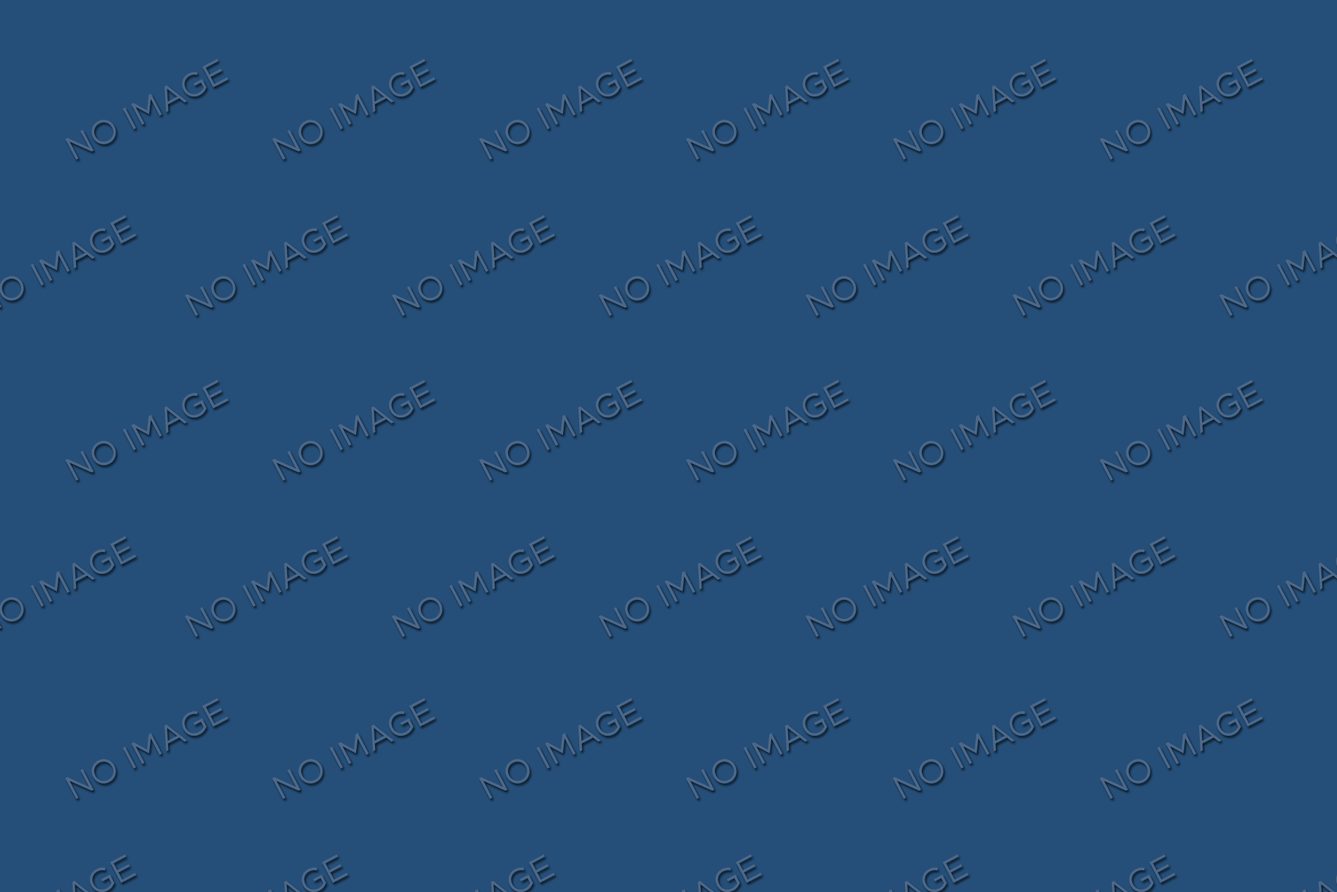
<style>
.page{position:relative;width:1337px;height:892px;background:#254f79}
.page>*{position:absolute;margin:0}
.t1{font:33.2px "Gotham-Book";color:#4b688a}
</style>
<div class="page">
<p class="t1" style="left:65px;top:58px;width:164px;height:102px;rotate:-28deg">NO IMAGE</p>
<p class="t1" style="left:272px;top:58px;width:164px;height:102px;rotate:-28deg">NO IMAGE</p>
<p class="t1" style="left:479px;top:58px;width:164px;height:102px;rotate:-28deg">NO IMAGE</p>
<p class="t1" style="left:686px;top:58px;width:163px;height:102px;rotate:-28deg">NO IMAGE</p>
<p class="t1" style="left:892px;top:58px;width:164px;height:102px;rotate:-28deg">NO IMAGE</p>
<p class="t1" style="left:1099px;top:58px;width:164px;height:102px;rotate:-28deg">NO IMAGE</p>
<p class="t1" style="left:184px;top:215px;width:164px;height:101px;rotate:-28deg">NO IMAGE</p>
<p class="t1" style="left:391px;top:215px;width:164px;height:101px;rotate:-28deg">NO IMAGE</p>
<p class="t1" style="left:598px;top:215px;width:164px;height:101px;rotate:-28deg">NO IMAGE</p>
<p class="t1" style="left:805px;top:215px;width:164px;height:101px;rotate:-28deg">NO IMAGE</p>
<p class="t1" style="left:1012px;top:215px;width:164px;height:101px;rotate:-28deg">NO IMAGE</p>
<p class="t1" style="left:65px;top:379px;width:164px;height:102px;rotate:-28deg">NO IMAGE</p>
<p class="t1" style="left:272px;top:379px;width:164px;height:102px;rotate:-28deg">NO IMAGE</p>
<p class="t1" style="left:479px;top:379px;width:164px;height:102px;rotate:-28deg">NO IMAGE</p>
<p class="t1" style="left:686px;top:379px;width:163px;height:102px;rotate:-28deg">NO IMAGE</p>
<p class="t1" style="left:892px;top:379px;width:164px;height:102px;rotate:-28deg">NO IMAGE</p>
<p class="t1" style="left:1099px;top:379px;width:164px;height:102px;rotate:-28deg">NO IMAGE</p>
<p class="t1" style="left:184px;top:536px;width:164px;height:101px;rotate:-28deg">NO IMAGE</p>
<p class="t1" style="left:391px;top:536px;width:164px;height:101px;rotate:-28deg">NO IMAGE</p>
<p class="t1" style="left:598px;top:536px;width:164px;height:101px;rotate:-28deg">NO IMAGE</p>
<p class="t1" style="left:805px;top:536px;width:164px;height:101px;rotate:-28deg">NO IMAGE</p>
<p class="t1" style="left:1012px;top:536px;width:164px;height:101px;rotate:-28deg">NO IMAGE</p>
<p class="t1" style="left:65px;top:697px;width:164px;height:102px;rotate:-28deg">NO IMAGE</p>
<p class="t1" style="left:272px;top:697px;width:164px;height:102px;rotate:-28deg">NO IMAGE</p>
<p class="t1" style="left:479px;top:697px;width:164px;height:102px;rotate:-28deg">NO IMAGE</p>
<p class="t1" style="left:686px;top:697px;width:163px;height:102px;rotate:-28deg">NO IMAGE</p>
<p class="t1" style="left:892px;top:697px;width:164px;height:102px;rotate:-28deg">NO IMAGE</p>
<p class="t1" style="left:1099px;top:697px;width:164px;height:102px;rotate:-28deg">NO IMAGE</p>
</div>
